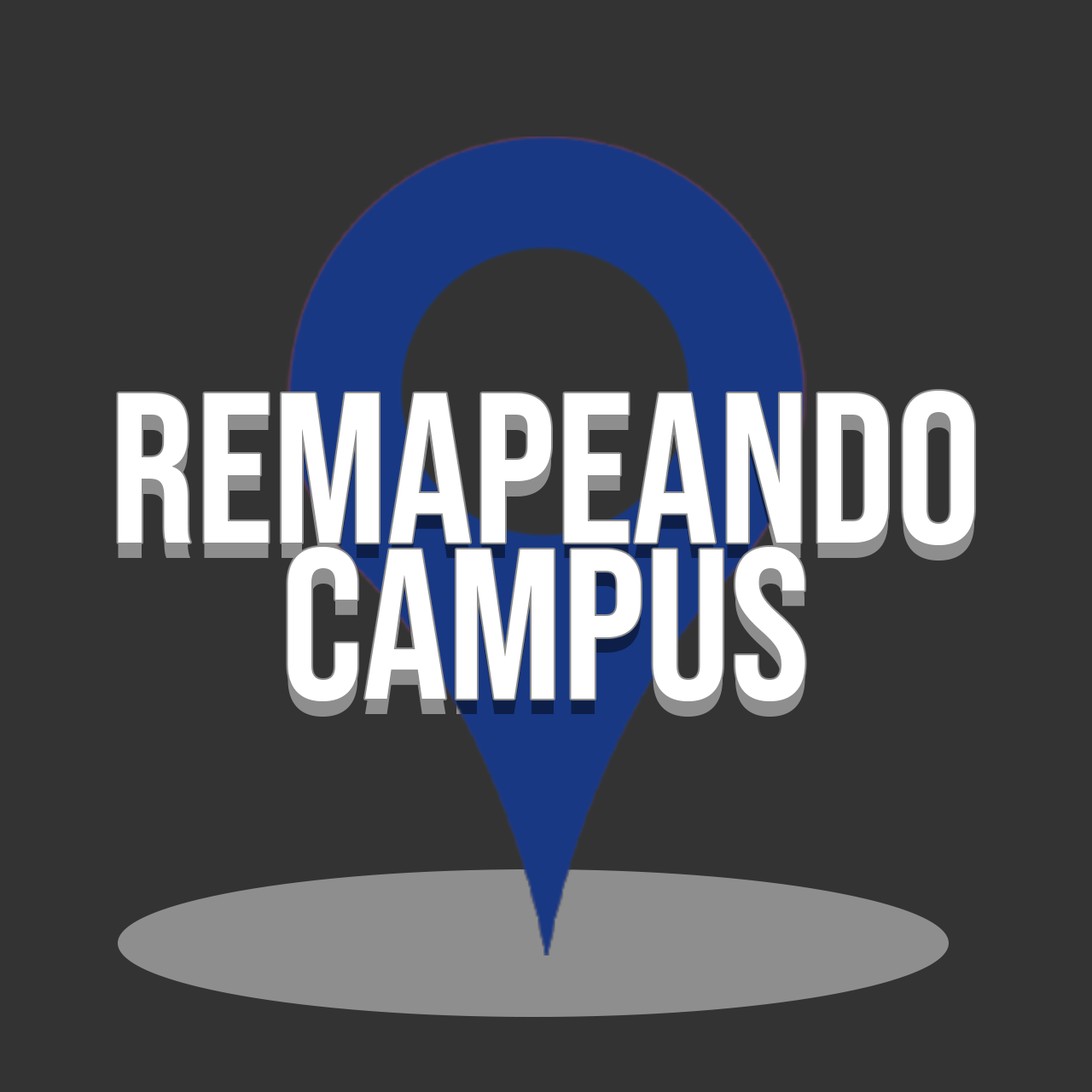
<style>
.page{position:relative;width:1092px;height:1092px;background:#333333}
.page>*{position:absolute;margin:0}
.t1{font:213.3px/155.8px "BebasNeue-Regular";color:#ffffff}
</style>
<div class="page">
<p class="t1" style="left:118px;top:391px;width:856px;height:310px;text-align:center">REMAPEANDO<br>CAMPUS</p>
</div>
